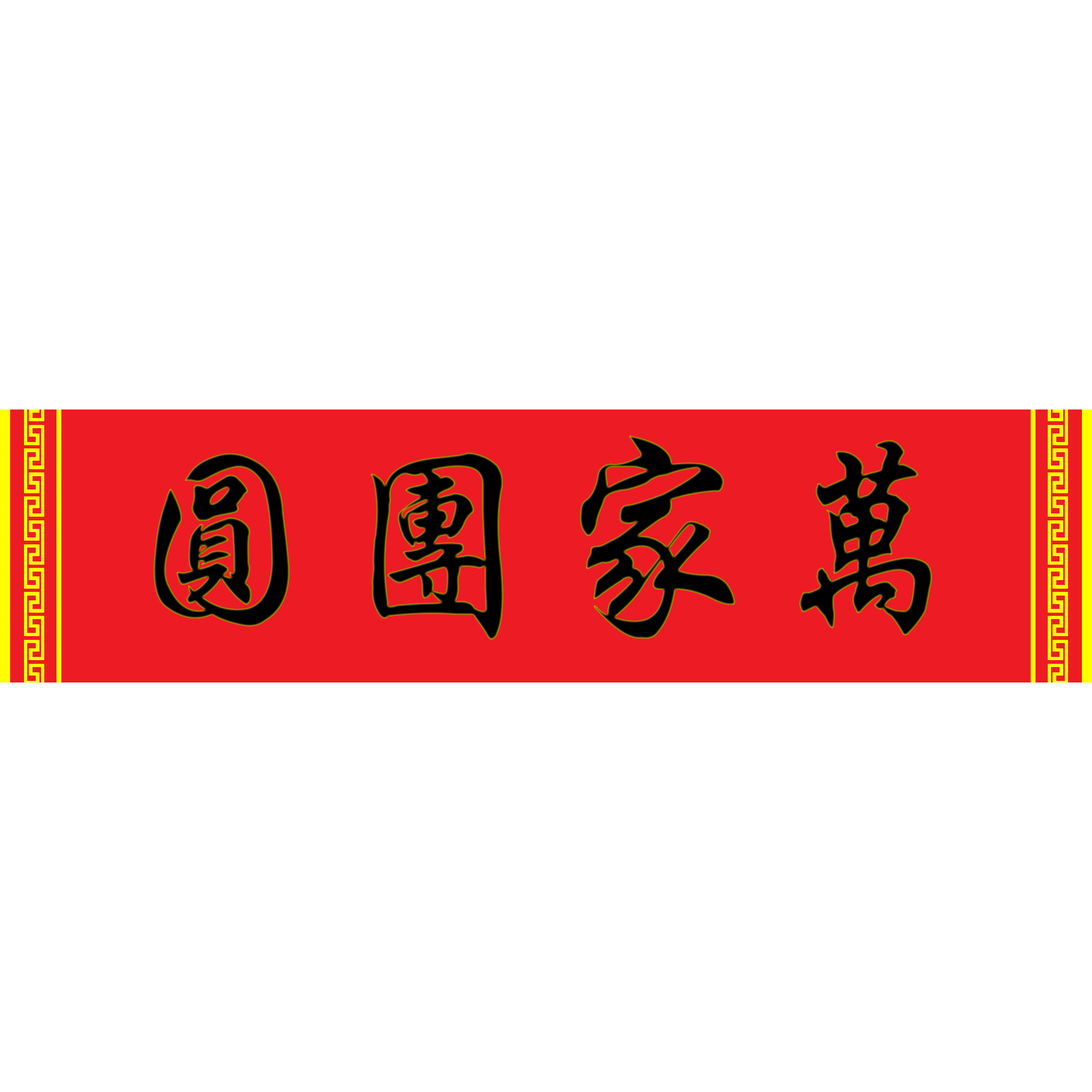
<style>
.page{position:relative;width:1092px;height:1092px;background:#ffffff}
.page>*{position:absolute;margin:0}
.t1{font:214.9px "FZXKFW--GB1-0";color:#000000}
</style>
<div class="page">
<p class="t1" style="left:154px;top:436px;width:778px;height:204px">圆团家万</p>
</div>
